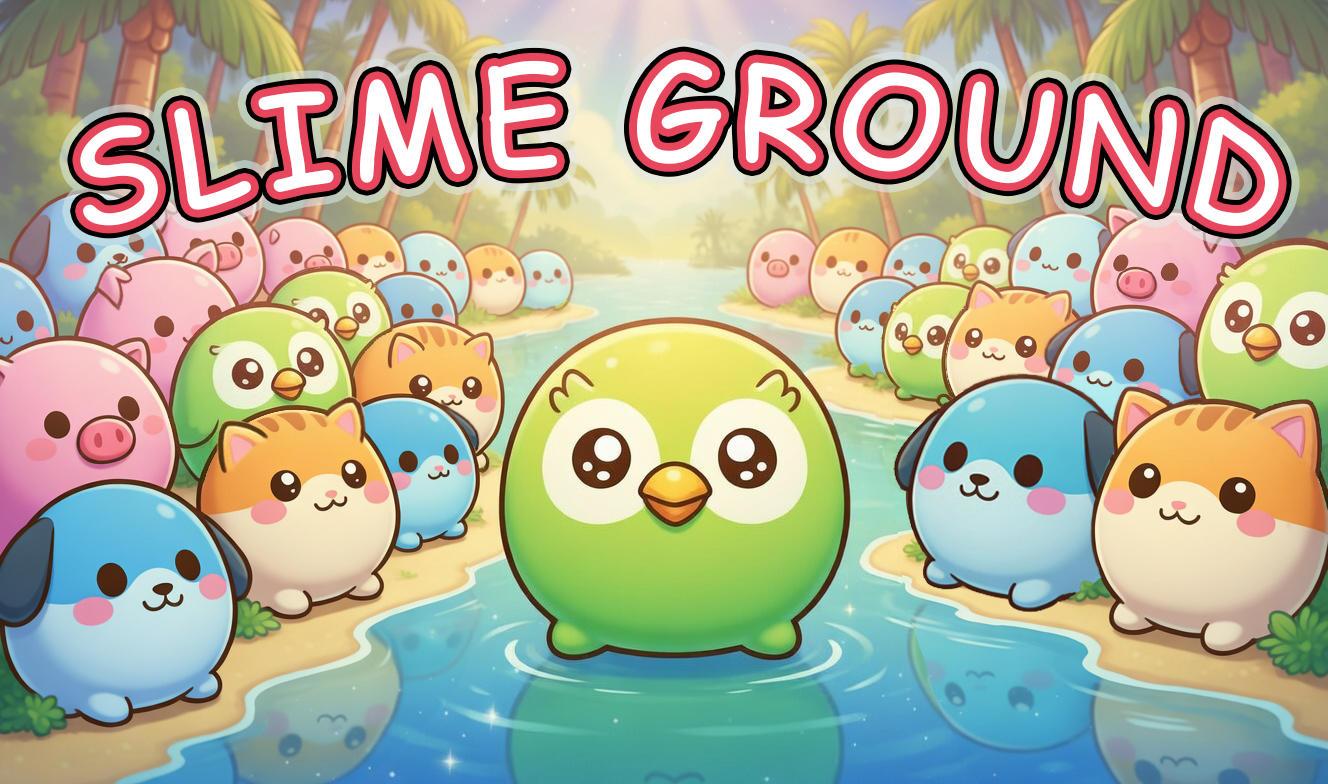
<style>
.page{position:relative;width:1328px;height:784px}
.page>*{position:absolute;margin:0}
.t1{font:130px "ComicSansMS";letter-spacing:0.1em;color:#ffffff}
</style>
<div class="page">
<p class="t1" style="left:80px;top:59px;width:1199px;height:167px">SLIME GROUND</p>
</div>
